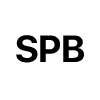
<style>
.page{position:relative;width:100px;height:100px;background:#ffffff}
.page>*{position:absolute;margin:0}
.t1{font:37.5px "SFProDisplay-Bold";color:#000000}
</style>
<div class="page">
<p class="t1" style="left:16px;top:35px;width:68px;height:28px">SPB</p>
</div>
